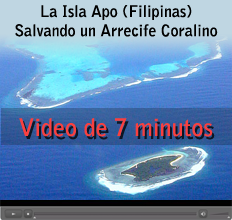
<style>
.page{position:relative;width:232px;height:220px}
.page>*{position:absolute;margin:0}
.t1{font:16px "BellGothicStd-Bold";color:#000000}
.t2{font:24px "BellGothicStd-Bold";color:#f84040}
</style>
<div class="page">
<p class="t1" style="left:15px;top:5px;width:203px;height:32px;text-align:center">La Isla Apo (Filipinas)<br>Salvando un Arrecife Coralino</p>
<p class="t2" style="left:19px;top:118px;width:194px;height:19px">Video de 7 minutos</p>
</div>
